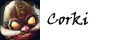
<style>
.page{position:relative;width:140px;height:40px;background:#ffffff}
.page>*{position:absolute;margin:0}
.t1{font:12px "VinerHandITC";color:#000000}
</style>
<div class="page">
<p class="t1" style="left:47px;top:11px;width:42px;height:15px">Corki</p>
</div>
